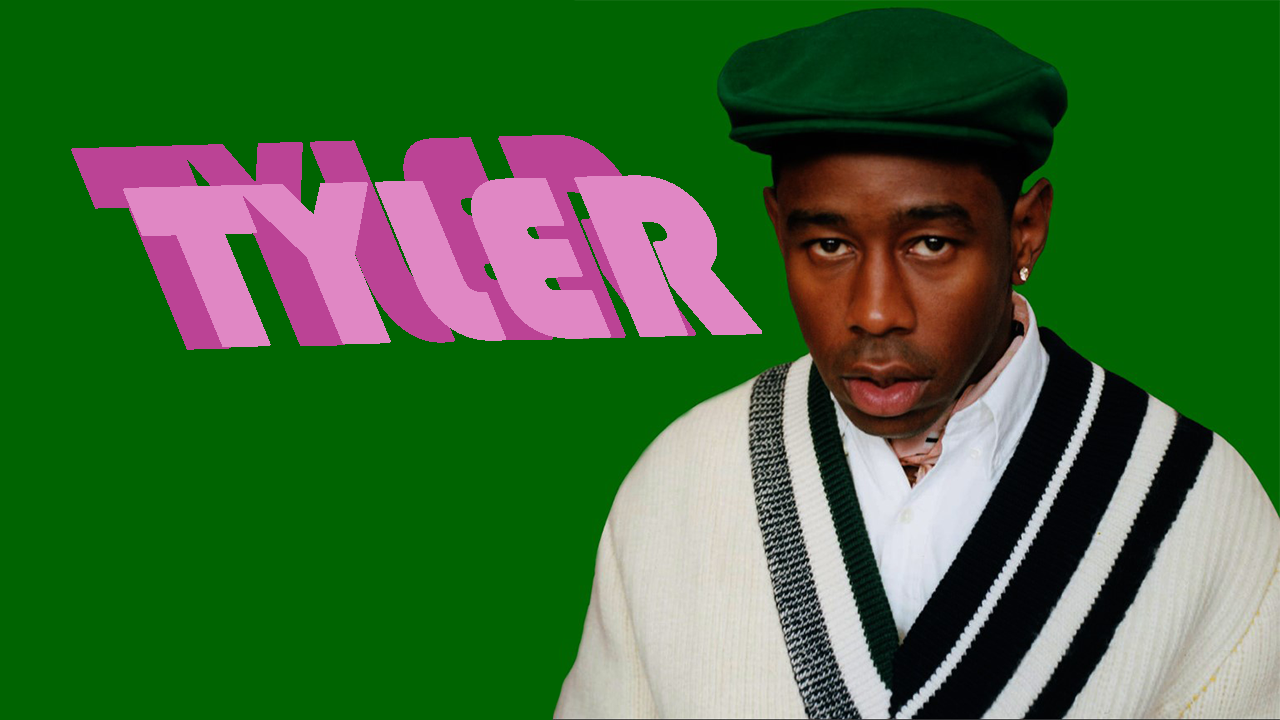
<style>
.page{position:relative;width:1280px;height:720px;background:#006401}
.page>*{position:absolute;margin:0}
.t1{font:338.2px "Bauhaus93";color:#bb4395;font-weight:bold;font-style:italic;scale:0.63 1}
.t2{font:271px "Bauhaus93";color:#e087c4;font-weight:bold;font-style:italic;scale:0.83 1}
</style>
<div class="page">
<p class="t1" style="left:71px;top:135px;width:625px;height:215px;rotate:-2deg">TYLER</p>
<p class="t2" style="left:123px;top:175px;width:639px;height:172px;rotate:-1deg">TYLER</p>
</div>
